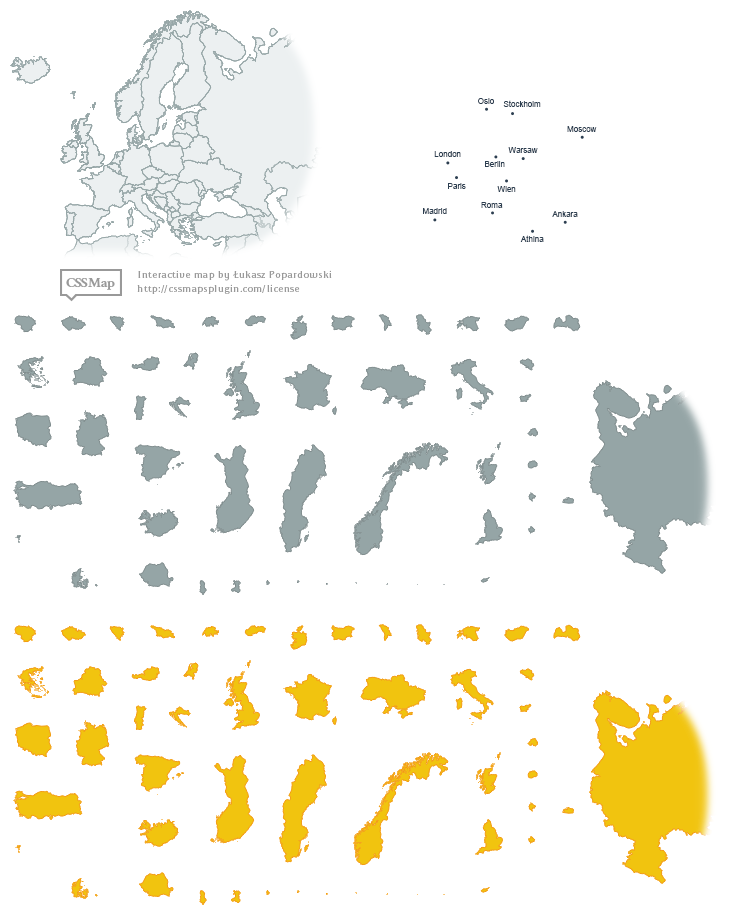
<style>
.page{position:relative;width:733px;height:920px;background:#ffffff}
.page>*{position:absolute;margin:0}
.t1{font:8px "ArialMT";color:#2c3e50}
</style>
<div class="page">
<p class="t1" style="left:478px;top:98px;width:16px;height:6px">Oslo</p>
<p class="t1" style="left:503px;top:100px;width:38px;height:7px">Stockholm</p>
<p class="t1" style="left:567px;top:126px;width:30px;height:6px">Moscow</p>
<p class="t1" style="left:508px;top:147px;width:30px;height:6px">Warsaw</p>
<p class="t1" style="left:434px;top:151px;width:27px;height:6px">London</p>
<p class="t1" style="left:485px;top:161px;width:20px;height:6px">Berlin</p>
<p class="t1" style="left:448px;top:183px;width:18px;height:6px">Paris</p>
<p class="t1" style="left:497px;top:186px;width:19px;height:6px">Wien</p>
<p class="t1" style="left:423px;top:208px;width:24px;height:6px">Madrid</p>
<p class="t1" style="left:481px;top:202px;width:22px;height:6px">Roma</p>
<p class="t1" style="left:552px;top:211px;width:26px;height:6px">Ankara</p>
<p class="t1" style="left:520px;top:235px;width:24px;height:7px">Athina</p>
</div>
